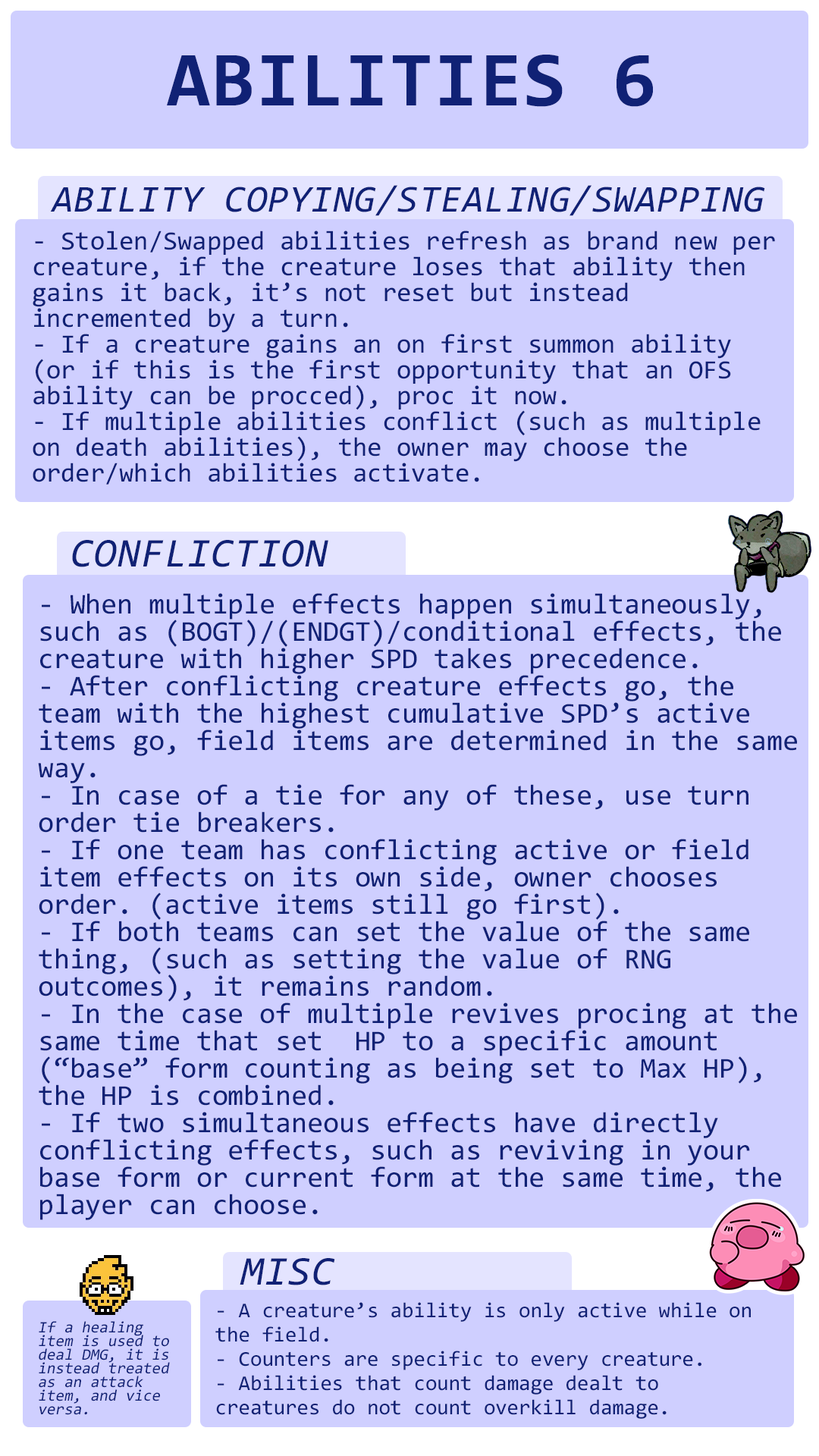
<style>
.page{position:relative;width:819px;height:1456px;background:#cfcfff}
.page>*{position:absolute;margin:0}
.t1{font:78.3px "Consolas-Bold";letter-spacing:0.02em;color:#102175}
.t2{font:37.9px "Consolas-Italic";letter-spacing:0.02em;color:#102175;text-transform:uppercase}
.t3{font:26.5px/25.8px "Consolas";color:#102175}
.t4{font:41.1px "Consolas-Italic";letter-spacing:0.02em;color:#102175}
.t5{font:28.8px/27.3px "Consolas";color:#102175}
.t6{font:21.2px/24.3px "Consolas";color:#102175}
.t7{font:15.9px/13.6px "Consolas";color:#102175;font-style:italic}
</style>
<div class="page">
<p class="t1" style="left:167px;top:55px;width:486px;height:52px">ABILITIES 6</p>
<p class="t2" style="left:50px;top:185px;width:715px;height:31px">Ability Copying/Stealing/Swapping</p>
<p class="t3" style="left:33px;top:231px;width:742px;height:254px">- Stolen/Swapped abilities refresh as brand new per creature, if the creature loses that ability then gains it back, it’s not reset but instead incremented by a turn.<br>- If a creature gains an on first summon ability (or if this is the first opportunity that an OFS ability can be procced), proc it now.<br>- If multiple abilities conflict (such as multiple on death abilities), the owner may choose the order/which abilities activate.</p>
<p class="t4" style="left:72px;top:540px;width:256px;height:27px">CONFLICTION</p>
<p class="t5" style="left:38px;top:593px;width:759px;height:627px">- When multiple effects happen simultaneously, such as (BOGT)/(ENDGT)/conditional effects, the creature with higher SPD takes precedence.<br>- After conflicting creature effects go, the team with the highest cumulative SPD’s active items go, field items are determined in the same way.<br>- In case of a tie for any of these, use turn order tie breakers.<br>- If one team has conflicting active or field item effects on its own side, owner chooses order. (active items still go first).<br>- If both teams can set the value of the same thing, (such as setting the value of RNG outcomes), it remains random.<br>- In the case of multiple revives procing at the same time that set  HP to a specific amount (“base” form counting as being set to Max HP), the HP is combined.<br>- If two simultaneous effects have directly conflicting effects, such as reviving in your base form or current form at the same time, the player can choose.</p>
<p class="t4" style="left:240px;top:1258px;width:95px;height:27px">MISC</p>
<p class="t6" style="left:215px;top:1302px;width:536px;height:117px">- A creature’s ability is only active while on the field.<br>- Counters are specific to every creature.<br>- Abilities that count damage dealt to creatures do not count overkill damage.</p>
<p class="t7" style="left:39px;top:1321px;width:131px;height:94px">If a healing item is used to deal DMG, it is instead treated as an attack item, and vice versa.</p>
</div>
